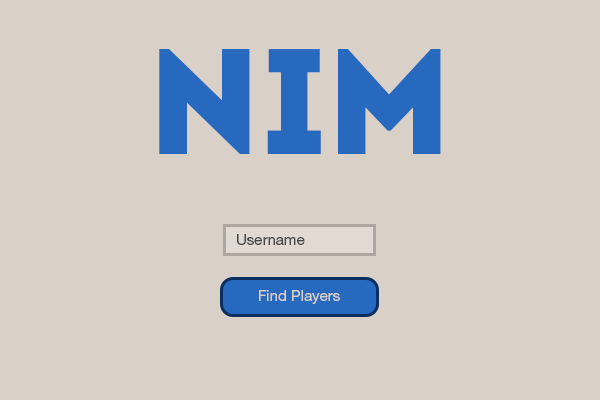
<style>
.page{position:relative;width:600px;height:400px;background:#d9d0c7}
.page>*{position:absolute;margin:0}
.t1{font:149.7px "Intro";color:#2669bf}
.t2{font:15px "HelveticaNeueLTPro-Roman";color:#454545}
.t3{font:15px "HelveticaNeueLTPro-Roman";color:#d9d0c7}
</style>
<div class="page">
<p class="t1" style="left:159px;top:49px;width:282px;height:105px">NIM</p>
<p class="t2" style="left:237px;top:234px;width:68px;height:11px">Username</p>
<p class="t3" style="left:259px;top:290px;width:81px;height:14px">Find Players</p>
</div>
